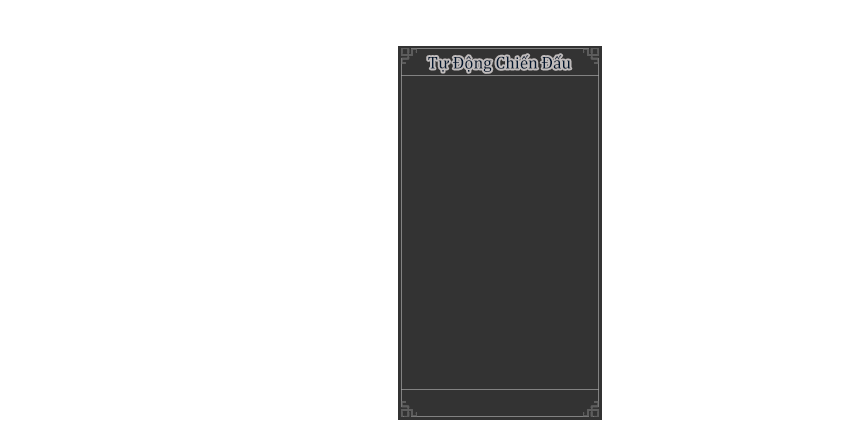
<style>
.page{position:relative;width:855px;height:446px;background:#ffffff}
.page>*{position:absolute;margin:0}
.t1{font:17.3px "Cambria";color:#01152d}
</style>
<div class="page">
<p class="t1" style="left:428px;top:55px;width:143px;height:17px">Tự Động Chiến Đấu</p>
</div>
